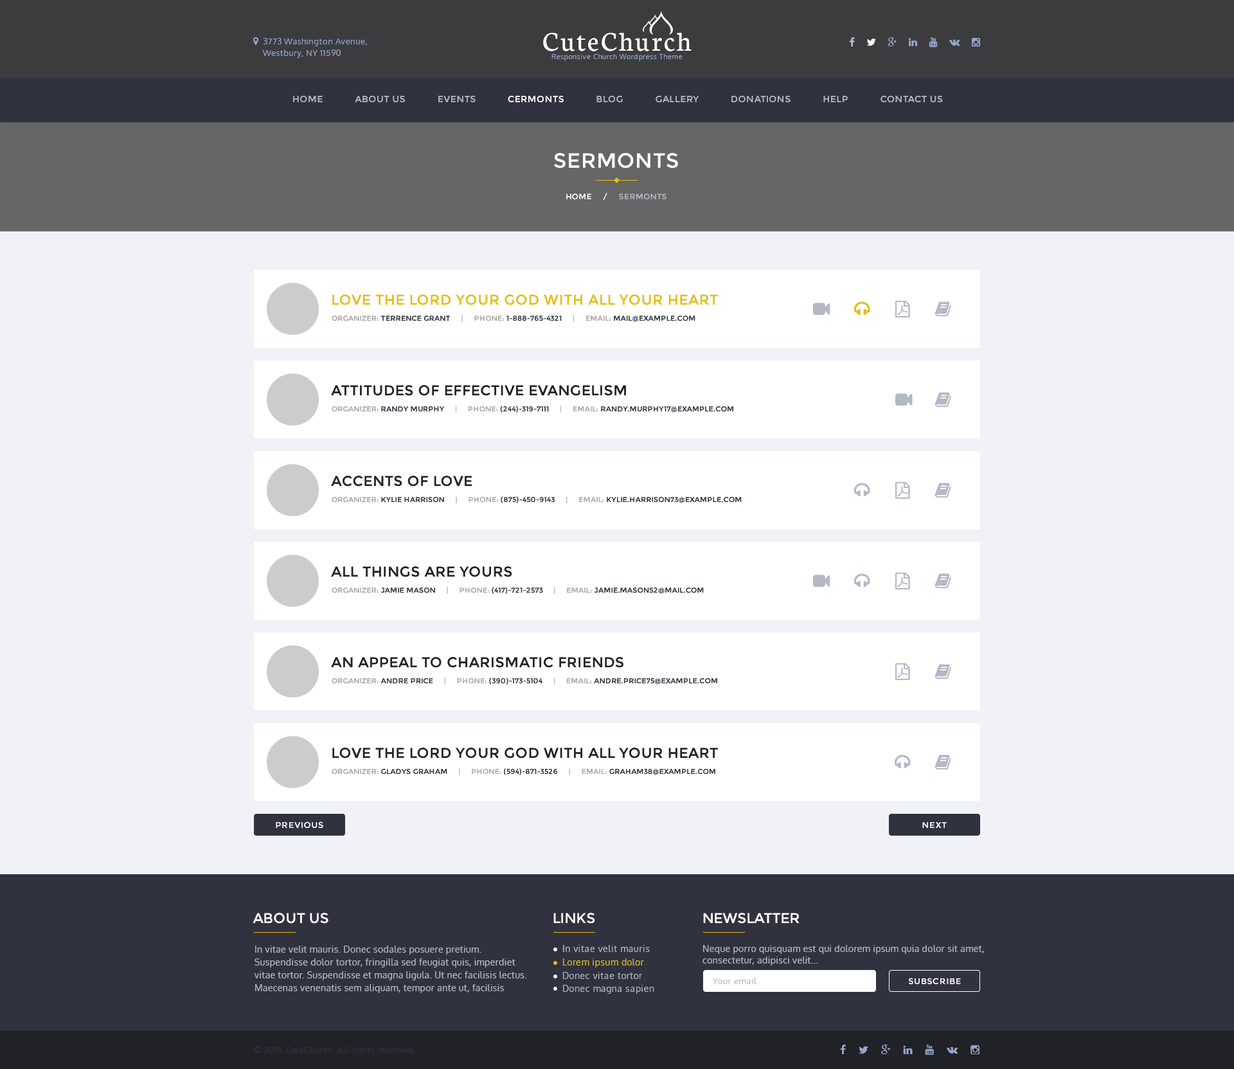
<style>
.page{position:relative;width:1234px;height:1069px;background:#f0f2f8}
.page>*{position:absolute;margin:0}
.t1{font:28.9px "Neuton-Regular";letter-spacing:0.07em;color:#ffffff}
.t2{font:7.1px "Oxygen-Regular";letter-spacing:0.05em;color:#96a5cd}
.t3{font:9px "Montserrat-Regular";letter-spacing:0.035em;color:#b3b8c5;text-transform:uppercase}
.t4{font:9px "Montserrat-Regular";letter-spacing:0.035em;color:#ffffff;text-transform:uppercase}
.t5{font:20.6px "Montserrat-Regular";letter-spacing:0.035em;color:#ffffff;text-transform:uppercase}
.t6{font:7.7px "Montserrat-Regular";letter-spacing:0.035em;color:#ffffff;text-transform:uppercase}
.t7{font:7.7px "Montserrat-Regular";letter-spacing:0.035em;color:#b3b8c5;text-transform:uppercase}
.t8{font:14.1px "Montserrat-Regular";letter-spacing:0.03em;color:#e2bf1d;text-transform:uppercase}
.t9{font:7.1px "Montserrat-Regular";letter-spacing:0.03em;color:#30333f;text-transform:uppercase}
.t10{font:7.1px "Montserrat-Regular";letter-spacing:0.03em;color:#a9a6a3;text-transform:uppercase}
.t11{font:14.1px "Montserrat-Regular";letter-spacing:0.03em;color:#212227;text-transform:uppercase}
.t12{font:8.4px "Montserrat-Regular";letter-spacing:0.05em;color:#ffffff;text-transform:uppercase}
.t13{font:14.1px "Montserrat-Regular";color:#ffffff;text-transform:uppercase}
.t14{font:9px/12.9px "Oxygen-Regular";letter-spacing:0.03em;color:#b3b8c5}
.t15{font:9px "Oxygen-Regular";letter-spacing:0.03em;color:#b3b8c5}
.t16{font:9px/11.6px "Oxygen-Regular";letter-spacing:0.03em;color:#b3b8c5}
.t17{font:9px "Oxygen-Regular";letter-spacing:0.03em;color:#e2bf1d}
.t18{font:8.4px "Oxygen-Regular";letter-spacing:0.05em;color:#b8b8b8}
.t19{font:8.4px "Oxygen-Regular";letter-spacing:0.05em;color:#30333f}
</style>
<div class="page">
<p class="t1" style="left:543px;top:33px;width:149px;height:18px">CuteChurch</p>
<p class="t2" style="left:552px;top:54px;width:131px;height:7px">Responsive Church Wordpress Theme</p>
<p class="t3" style="left:293px;top:96px;width:650px;height:7px">Home           About Us           Events           <span class="t4">Cermonts           </span>Blog           Gallery           Donations           Help           Contact Us</p>
<p class="t5" style="left:554px;top:153px;width:124px;height:15px">sermonts</p>
<p class="t6" style="left:566px;top:193px;width:101px;height:8px">Home     /     <span class="t7">sermonts</span></p>
<p class="t8" style="left:332px;top:294px;width:386px;height:11px">Love the Lord Your God with All Your Heart</p>
<p class="t9" style="left:332px;top:315px;width:364px;height:7px"><span class="t10">Organizer: </span>Terrence Grant     <span class="t10">|     Phone: </span>1-888-765-4321     <span class="t10">|     Email: </span>mail@example.com</p>
<p class="t11" style="left:331px;top:385px;width:295px;height:11px">Attitudes of Effective Evangelism</p>
<p class="t9" style="left:332px;top:406px;width:402px;height:7px"><span class="t10">Organizer: </span>Randy Murphy     <span class="t10">|     Phone: </span>(244)-319-7111     <span class="t10">|     Email: </span>randy.murphy17@example.com</p>
<p class="t11" style="left:331px;top:476px;width:142px;height:11px">Accents of Love</p>
<p class="t9" style="left:332px;top:496px;width:410px;height:7px"><span class="t10">Organizer: </span>kylie harrison     <span class="t10">|     Phone: </span>(875)-450-9143     <span class="t10">|     Email: </span>kylie.harrison73@example.com</p>
<p class="t11" style="left:331px;top:566px;width:181px;height:11px">All Things are Yours</p>
<p class="t9" style="left:332px;top:587px;width:372px;height:7px"><span class="t10">Organizer: </span>Jamie Mason     <span class="t10">|     Phone: </span>(417)-721-2573     <span class="t10">|     Email: </span>jamie.mason52@mail.com</p>
<p class="t11" style="left:331px;top:657px;width:293px;height:11px">An Appeal to Charismatic Friends</p>
<p class="t9" style="left:332px;top:678px;width:385px;height:7px"><span class="t10">Organizer: </span>Andre Price     <span class="t10">|     Phone: </span>(390)-173-5104     <span class="t10">|     Email: </span>andre.price75@example.com</p>
<p class="t11" style="left:332px;top:748px;width:386px;height:11px">Love the Lord Your God with All Your Heart</p>
<p class="t9" style="left:332px;top:768px;width:384px;height:7px"><span class="t10">Organizer: </span>Gladys Graham     <span class="t10">|     Phone: </span>(594)-871-3526     <span class="t10">|     Email: </span>graham38@example.com</p>
<p class="t12" style="left:276px;top:822px;width:47px;height:7px">Previous</p>
<p class="t12" style="left:923px;top:822px;width:24px;height:6px">next</p>
<p class="t13" style="left:253px;top:913px;width:75px;height:11px">about us</p>
<p class="t13" style="left:554px;top:913px;width:41px;height:11px">links</p>
<p class="t13" style="left:703px;top:913px;width:97px;height:11px">newslatter</p>
<p class="t14" style="left:254px;top:946px;width:273px;height:47px">In vitae velit mauris. Donec sodales posuere pretium. Suspendisse dolor tortor, fringilla sed feugiat quis, imperdiet vitae tortor. Suspendisse et magna ligula. Ut nec facilisis lectus. Maecenas venenatis sem aliquam, tempor ante ut, facilisis ipsum. Aenean finibus justo et odio lobortis feugiat. In vulputate lacinia ex sit amet molestie.</p>
<p class="t15" style="left:563px;top:945px;width:87px;height:7px">In vitae velit mauris</p>
<p class="t16" style="left:703px;top:945px;width:281px;height:21px">Neque porro quisquam est qui dolorem ipsum quia dolor sit amet, <br>consectetur, adipisci velit...</p>
<p class="t17" style="left:563px;top:959px;width:81px;height:9px">Lorem ipsum dolor</p>
<p class="t15" style="left:563px;top:972px;width:79px;height:7px">Donec vitae tortor</p>
<p class="t18" style="left:713px;top:978px;width:44px;height:6px">Your email</p>
<p class="t12" style="left:908px;top:978px;width:53px;height:7px">subscribe</p>
<p class="t15" style="left:563px;top:985px;width:91px;height:9px">Donec magna sapien</p>
<p class="t19" style="left:254px;top:1047px;width:161px;height:8px">© 2015 CuteChurch. All rights reserved.</p>
</div>
